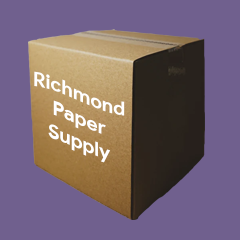
<style>
.page{position:relative;width:240px;height:240px;background:#70608e}
.page>*{position:absolute;margin:0}
.t1{font:20px "ProductSans-Bold";color:#ffffff}
</style>
<div class="page">
<p class="t1" style="left:34px;top:71px;width:91px;height:92px;text-align:center">Richmond<br>Paper<br>Supply</p>
</div>
